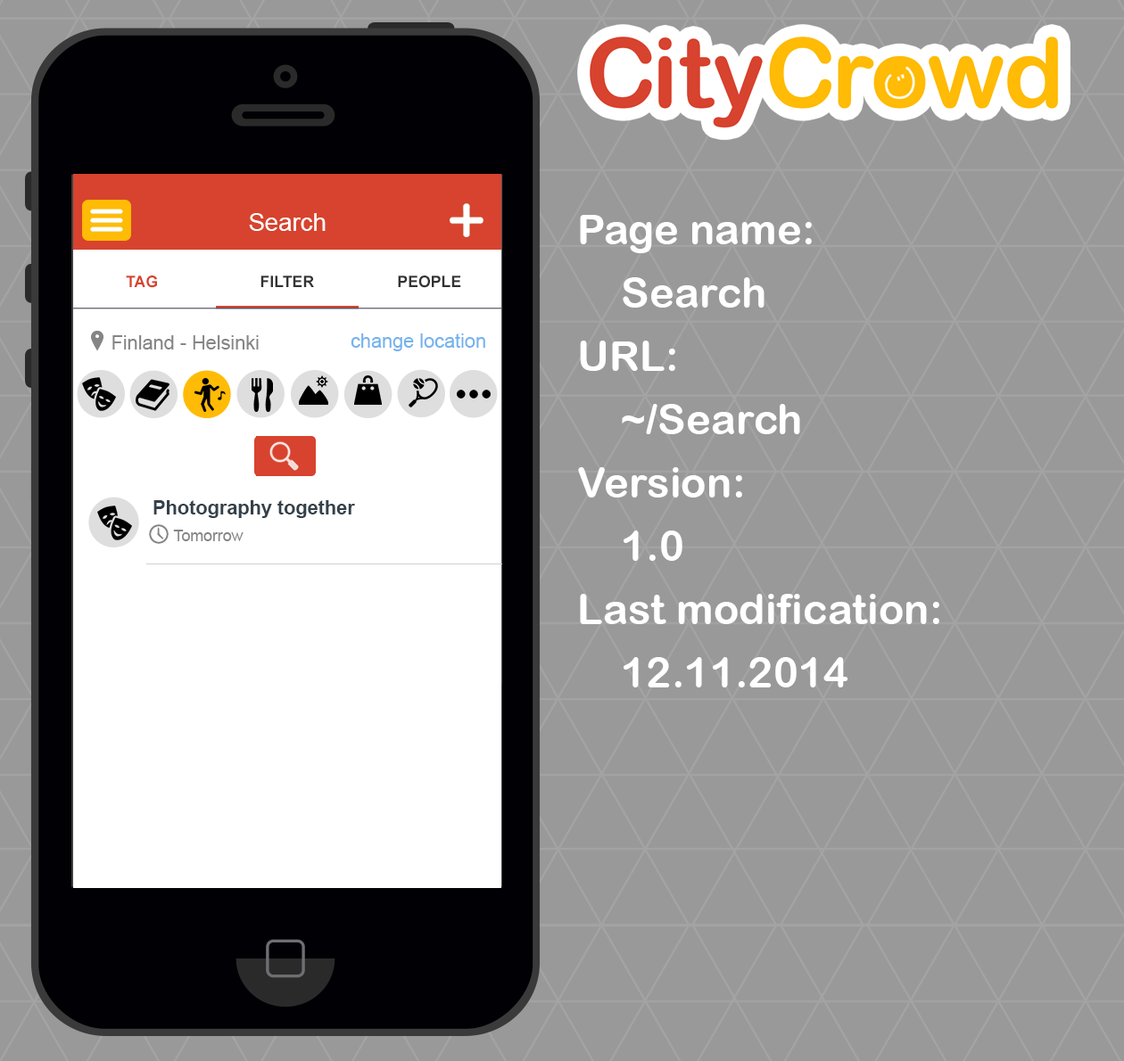
<style>
.page{position:relative;width:1124px;height:1061px;background:#999999}
.page>*{position:absolute;margin:0}
.t1{font:24.6px "ArialMT";color:#ffffff}
.t2{font:42.2px/63.3px "ArialRoundedMTBold";color:#ffffff}
.t3{font:15.8px "Arial-BoldMT";color:#d7432e;text-transform:uppercase}
.t4{font:15.8px "Arial-BoldMT";color:#333333;text-transform:uppercase}
.t5{font:19.3px "ArialMT";color:#858585}
.t6{font:19.3px "ArialMT";color:#74b3ed}
.t7{font:19.3px "Arial-BoldMT";color:#34414b}
.t8{font:15.8px "ArialMT";color:#858585}
</style>
<div class="page">
<p class="t1" style="left:249px;top:213px;width:77px;height:18px">Search</p>
<p class="t2" style="left:578px;top:215px;width:361px;height:473px">Page name:<br>Search<br>URL:<br>~/Search<br>Version:<br>1.0<br>Last modification:<br>12.11.2014</p>
<p class="t3" style="left:126px;top:276px;width:31px;height:12px">TAG</p>
<p class="t4" style="left:260px;top:276px;width:54px;height:11px">FILTER</p>
<p class="t4" style="left:398px;top:276px;width:63px;height:12px">PEOPLE</p>
<p class="t5" style="left:112px;top:335px;width:147px;height:15px">Finland - Helsinki</p>
<p class="t6" style="left:350px;top:334px;width:135px;height:17px">change location</p>
<p class="t7" style="left:153px;top:500px;width:202px;height:18px">Photography together</p>
<p class="t8" style="left:173px;top:530px;width:70px;height:11px">Tomorrow</p>
</div>
